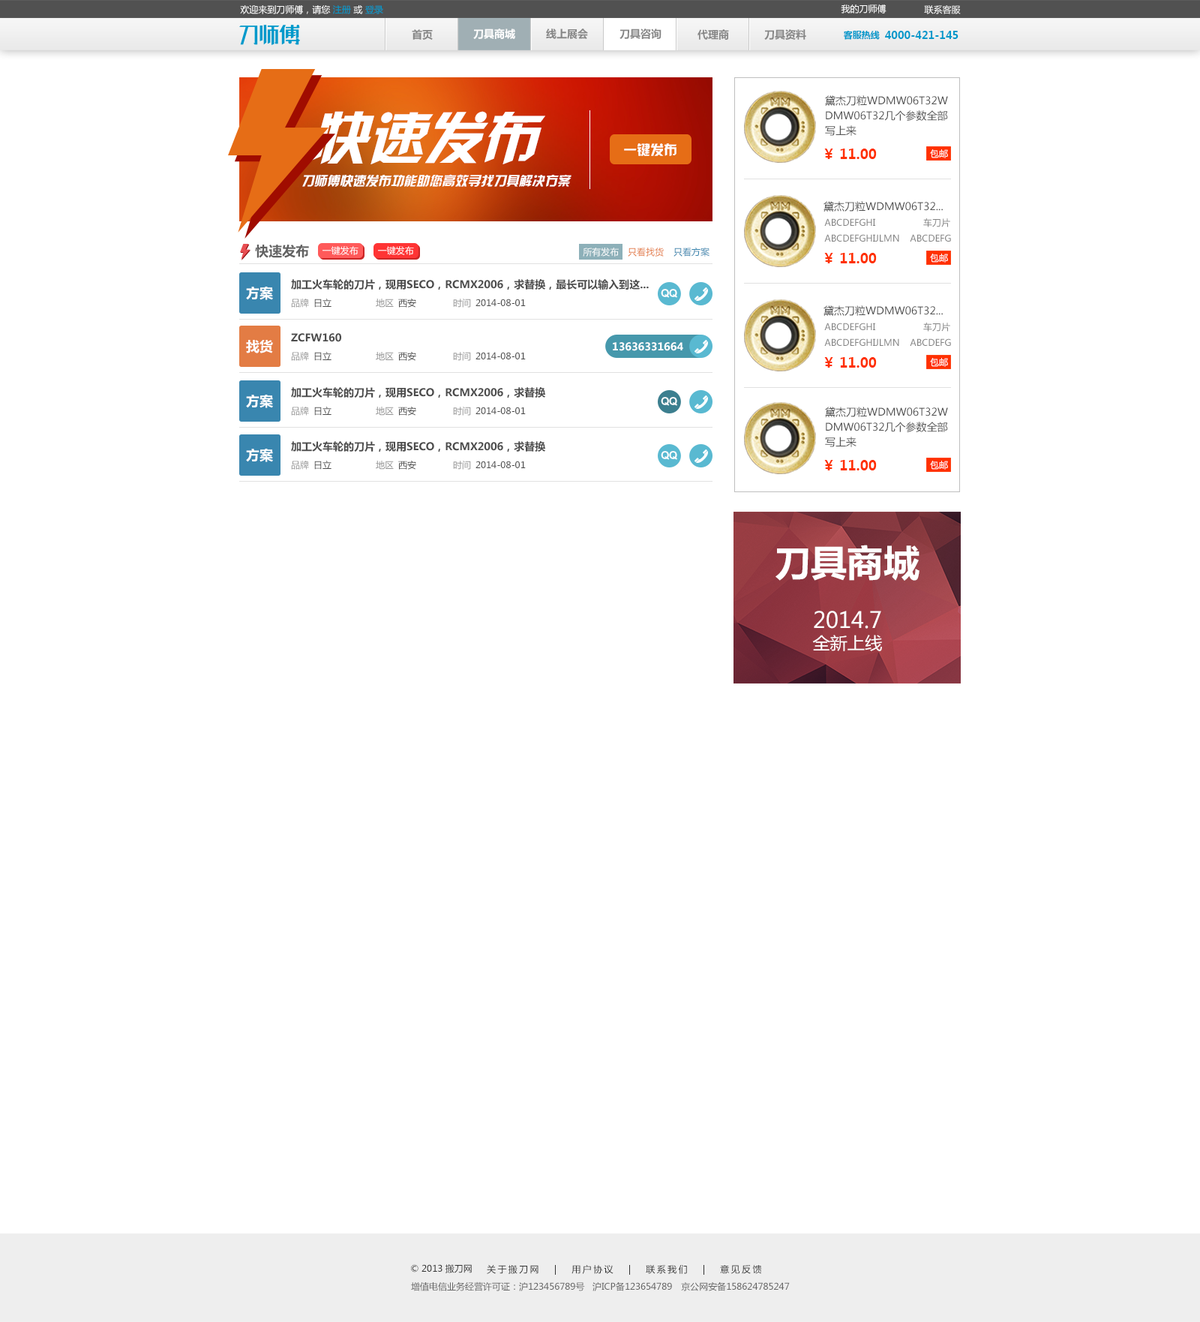
<style>
.page{position:relative;width:1200px;height:1322px;background:#ffffff}
.page>*{position:absolute;margin:0}
.t1{font:9px "MicrosoftYaHei";color:#ffffff}
.t2{font:9px "MicrosoftYaHei";color:#0099cb}
.t3{font:10.5px "MicrosoftYaHei-Bold";color:#868686}
.t4{font:10.5px "MicrosoftYaHei-Bold";color:#ffffff}
.t5{font:9px "MicrosoftYaHei-Bold";color:#0099cb}
.t6{font:10.5px "MicrosoftYaHei-Bold";color:#0099cb}
.t7{font:10.5px/15px "MicrosoftYaHei";color:#525252}
.t8{font:58.4px "HYk2gj";color:#ffffff}
.t9{font:13.5px "HYk2gj";color:#ffffff}
.t10{font:13.5px "MicrosoftYaHei-Bold";color:#ff3000}
.t11{font:13.1px "HYk2gj";color:#ffffff}
.t12{font:10.5px "MicrosoftYaHei";color:#525252}
.t13{font:9px "MicrosoftYaHei";color:#848484}
.t14{font:13.5px "MicrosoftYaHei-Bold";color:#616161}
.t15{font:9px "MicrosoftYaHei";color:#e37c44}
.t16{font:9px "MicrosoftYaHei";color:#3986af}
.t17{font:10.5px "MicrosoftYaHei-Bold";color:#4c4c4c}
.t18{font:13.5px "MicrosoftYaHei-Bold";color:#ffffff}
.t19{font:10.5px "Arial-BoldMT";color:#ffffff}
.t20{font:9px "MicrosoftYaHei";color:#959595}
.t21{font:9px "MicrosoftYaHei";color:#4c4c4c}
.t22{font:36px "MicrosoftYaHei-Bold";color:#ffffff}
.t23{font:22.2px "MicrosoftYaHei";color:#ffffff}
.t24{font:16.9px "MicrosoftYaHei";color:#ffffff}
.t25{font:9px "MicrosoftYaHei";color:#333333}
.t26{font:9px "MicrosoftYaHei";letter-spacing:0.2em;color:#333333}
.t27{font:9px "MicrosoftYaHei";color:#666666}
</style>
<div class="page">
<p class="t1" style="left:240px;top:5px;width:143px;height:9px">欢迎来到刀师傅，请您 <span class="t2">注册 </span>或 <span class="t2">登录</span></p>
<p class="t1" style="left:841px;top:4px;width:45px;height:10px">我的刀师傅</p>
<p class="t1" style="left:924px;top:5px;width:37px;height:9px">联系客服</p>
<p class="t3" style="left:412px;top:29px;width:21px;height:11px">首页</p>
<p class="t4" style="left:473px;top:28px;width:42px;height:11px">刀具商城</p>
<p class="t3" style="left:546px;top:28px;width:42px;height:11px">线上展会</p>
<p class="t3" style="left:620px;top:28px;width:42px;height:11px">刀具咨询</p>
<p class="t3" style="left:698px;top:29px;width:31px;height:11px">代理商</p>
<p class="t3" style="left:764px;top:29px;width:42px;height:11px">刀具资料</p>
<p class="t5" style="left:844px;top:30px;width:36px;height:10px">客服热线</p>
<p class="t6" style="left:885px;top:31px;width:73px;height:8px">4000-421-145</p>
<p class="t7" style="left:825px;top:95px;width:123px;height:41px">黛杰刀粒WDMW06T32W<br>DMW06T32几个参数全部写上来</p>
<p class="t8" style="left:312px;top:111px;width:233px;height:53px">快速发布</p>
<p class="t9" style="left:624px;top:143px;width:52px;height:13px">一键发布</p>
<p class="t10" style="left:824px;top:148px;width:53px;height:11px">￥ 11.00</p>
<p class="t1" style="left:930px;top:149px;width:18px;height:9px">包邮</p>
<p class="t11" style="left:302px;top:174px;width:270px;height:13px">刀师傅快速发布功能助您高效寻找刀具解决方案</p>
<p class="t12" style="left:824px;top:201px;width:119px;height:11px">黛杰刀粒WDMW06T32...</p>
<p class="t13" style="left:824px;top:218px;width:51px;height:8px">ABCDEFGHI</p>
<p class="t13" style="left:923px;top:218px;width:27px;height:9px">车刀片</p>
<p class="t14" style="left:255px;top:244px;width:54px;height:14px">快速发布</p>
<p class="t1" style="left:322px;top:246px;width:36px;height:9px">一键发布</p>
<p class="t1" style="left:378px;top:246px;width:36px;height:9px">一键发布</p>
<p class="t13" style="left:824px;top:234px;width:75px;height:8px">ABCDEFGHIJLMN</p>
<p class="t13" style="left:910px;top:234px;width:41px;height:8px">ABCDEFG</p>
<p class="t1" style="left:583px;top:248px;width:36px;height:8px">所有发布</p>
<p class="t15" style="left:628px;top:248px;width:36px;height:8px">只看找货</p>
<p class="t16" style="left:674px;top:247px;width:36px;height:9px">只看方案</p>
<p class="t10" style="left:824px;top:253px;width:53px;height:10px">￥ 11.00</p>
<p class="t1" style="left:930px;top:254px;width:18px;height:8px">包邮</p>
<p class="t17" style="left:291px;top:279px;width:358px;height:11px">加工火车轮的刀片，现用SECO，RCMX2006，求替换，最长可以输入到这...</p>
<p class="t18" style="left:246px;top:286px;width:27px;height:14px">方案</p>
<p class="t19" style="left:661px;top:289px;width:16px;height:9px">QQ</p>
<p class="t20" style="left:291px;top:298px;width:18px;height:10px">品牌</p>
<p class="t21" style="left:314px;top:298px;width:18px;height:10px">日立</p>
<p class="t20" style="left:376px;top:298px;width:18px;height:10px">地区</p>
<p class="t21" style="left:398px;top:298px;width:18px;height:10px">西安</p>
<p class="t20" style="left:453px;top:298px;width:18px;height:10px">时间</p>
<p class="t21" style="left:476px;top:298px;width:50px;height:8px">2014-08-01</p>
<p class="t12" style="left:824px;top:305px;width:119px;height:11px">黛杰刀粒WDMW06T32...</p>
<p class="t13" style="left:824px;top:322px;width:51px;height:8px">ABCDEFGHI</p>
<p class="t13" style="left:923px;top:322px;width:27px;height:10px">车刀片</p>
<p class="t18" style="left:246px;top:340px;width:27px;height:13px">找货</p>
<p class="t17" style="left:291px;top:333px;width:50px;height:9px">ZCFW160</p>
<p class="t4" style="left:613px;top:342px;width:70px;height:9px">13636331664</p>
<p class="t13" style="left:824px;top:338px;width:75px;height:8px">ABCDEFGHIJLMN</p>
<p class="t13" style="left:910px;top:338px;width:41px;height:8px">ABCDEFG</p>
<p class="t20" style="left:291px;top:352px;width:18px;height:9px">品牌</p>
<p class="t21" style="left:314px;top:352px;width:18px;height:9px">日立</p>
<p class="t20" style="left:376px;top:352px;width:18px;height:9px">地区</p>
<p class="t21" style="left:398px;top:352px;width:18px;height:9px">西安</p>
<p class="t20" style="left:453px;top:352px;width:18px;height:9px">时间</p>
<p class="t21" style="left:476px;top:352px;width:50px;height:7px">2014-08-01</p>
<p class="t10" style="left:824px;top:357px;width:53px;height:11px">￥ 11.00</p>
<p class="t1" style="left:930px;top:358px;width:18px;height:9px">包邮</p>
<p class="t17" style="left:291px;top:387px;width:254px;height:11px">加工火车轮的刀片，现用SECO，RCMX2006，求替换</p>
<p class="t18" style="left:246px;top:394px;width:27px;height:14px">方案</p>
<p class="t19" style="left:661px;top:397px;width:16px;height:9px">QQ</p>
<p class="t20" style="left:291px;top:406px;width:18px;height:10px">品牌</p>
<p class="t21" style="left:314px;top:406px;width:18px;height:10px">日立</p>
<p class="t20" style="left:376px;top:406px;width:18px;height:10px">地区</p>
<p class="t21" style="left:398px;top:406px;width:18px;height:10px">西安</p>
<p class="t20" style="left:453px;top:406px;width:18px;height:10px">时间</p>
<p class="t21" style="left:476px;top:406px;width:50px;height:8px">2014-08-01</p>
<p class="t7" style="left:825px;top:406px;width:123px;height:41px">黛杰刀粒WDMW06T32W<br>DMW06T32几个参数全部写上来</p>
<p class="t18" style="left:246px;top:448px;width:27px;height:14px">方案</p>
<p class="t17" style="left:291px;top:441px;width:254px;height:11px">加工火车轮的刀片，现用SECO，RCMX2006，求替换</p>
<p class="t20" style="left:291px;top:460px;width:18px;height:10px">品牌</p>
<p class="t21" style="left:314px;top:460px;width:18px;height:10px">日立</p>
<p class="t20" style="left:376px;top:460px;width:18px;height:10px">地区</p>
<p class="t21" style="left:398px;top:460px;width:18px;height:10px">西安</p>
<p class="t20" style="left:453px;top:460px;width:18px;height:10px">时间</p>
<p class="t21" style="left:476px;top:460px;width:50px;height:8px">2014-08-01</p>
<p class="t19" style="left:661px;top:451px;width:16px;height:9px">QQ</p>
<p class="t10" style="left:824px;top:460px;width:53px;height:10px">￥ 11.00</p>
<p class="t1" style="left:930px;top:460px;width:18px;height:10px">包邮</p>
<p class="t22" style="left:776px;top:544px;width:144px;height:36px">刀具商城</p>
<p class="t23" style="left:814px;top:610px;width:67px;height:18px">2014.7</p>
<p class="t24" style="left:812px;top:634px;width:70px;height:17px">全新上线</p>
<p class="t25" style="left:411px;top:1264px;width:61px;height:9px">© 2013 搬刀网</p>
<p class="t26" style="left:487px;top:1264px;width:275px;height:10px">关于搬刀网   |   用户协议   |   联系我们   |   意见反馈</p>
<p class="t27" style="left:411px;top:1281px;width:379px;height:10px">增值电信业务经营许可证：沪123456789号   沪ICP备123654789　京公网安备158624785247</p>
</div>
